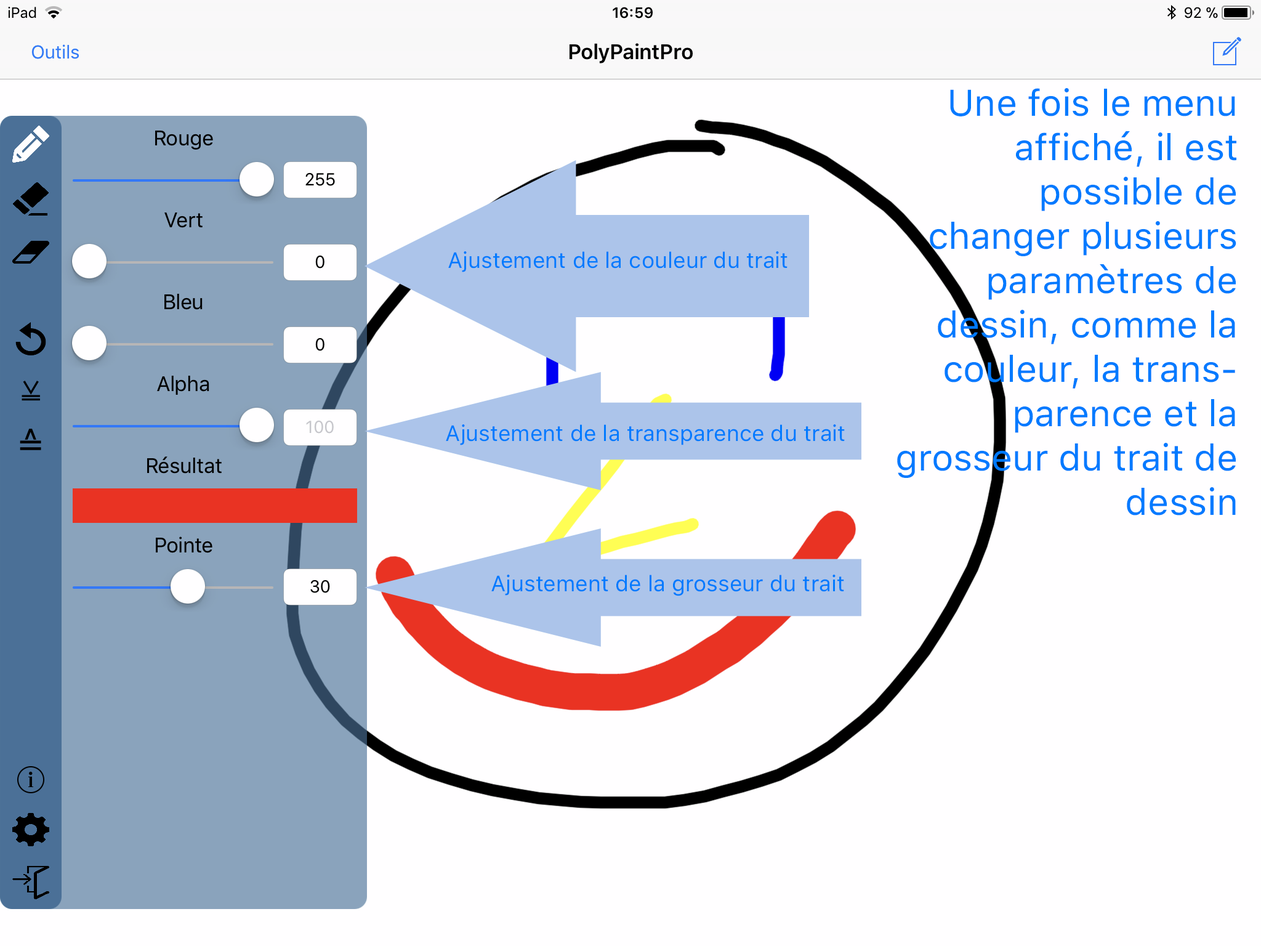
<style>
.page{position:relative;width:1261px;height:946px;background:#fffeff}
.page>*{position:absolute;margin:0}
.t1{font:36.9px "SFProText-Regular";color:#007aff}
.t2{font:22.2px "SFProText-Regular";color:#007aff}
</style>
<div class="page">
<p class="t1" style="left:897px;top:88px;width:339px;height:427px;text-align:right">Une fois le menu affiché, il est <br>possible de <br>changer plusieurs paramètres de dessin, comme la couleur, la transparence et la <br>grosseur du trait de dessin</p>
<p class="t2" style="left:448px;top:251px;width:339px;height:21px">Ajustement de la couleur du trait</p>
<p class="t2" style="left:446px;top:424px;width:399px;height:21px">Ajustement de la transparence du trait</p>
<p class="t2" style="left:491px;top:574px;width:353px;height:22px">Ajustement de la grosseur du trait</p>
</div>
